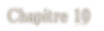
<style>
.page{position:relative;width:104px;height:31px;background:#ffffff}
.page>*{position:absolute;margin:0}
.t1{font:19px "MS-PMincho";color:#d6cdc1;font-weight:bold;scale:0.84 1}
</style>
<div class="page">
<p class="t1" style="left:8px;top:8px;width:82px;height:17px">Chapitre 10</p>
</div>
